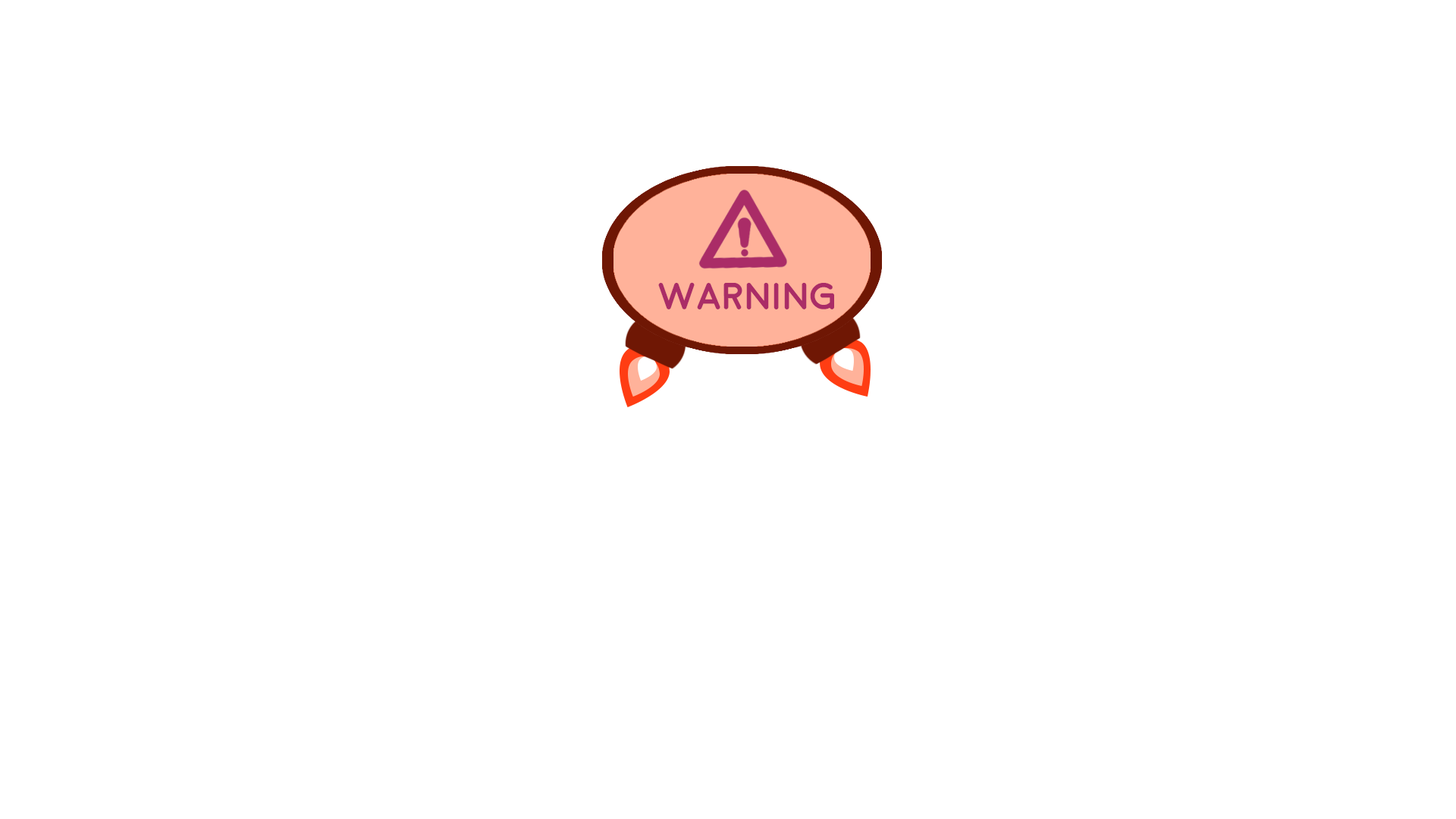
<style>
.page{position:relative;width:1456px;height:819px;background:#ffffff}
.page>*{position:absolute;margin:0}
.t1{font:37.9px "Moon-Bold";color:#aa2c67}
</style>
<div class="page">
<p class="t1" style="left:658px;top:282px;width:176px;height:27px">WARNING</p>
</div>
